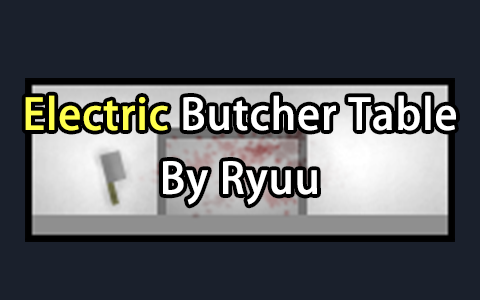
<style>
.page{position:relative;width:480px;height:300px;background:#1a202c}
.page>*{position:absolute;margin:0}
.t1{font:42px/64px "AdobeHeitiStd-Regular";color:#ffffff;font-weight:bold}
.t2{font:42px/64px "AdobeHeitiStd-Regular";color:#ffff4d;font-weight:bold}
</style>
<div class="page">
<p class="t1" style="left:25px;top:95px;width:431px;height:110px;text-align:center"><span class="t2">Electric</span> Butcher Table<br>By Ryuu</p>
</div>
